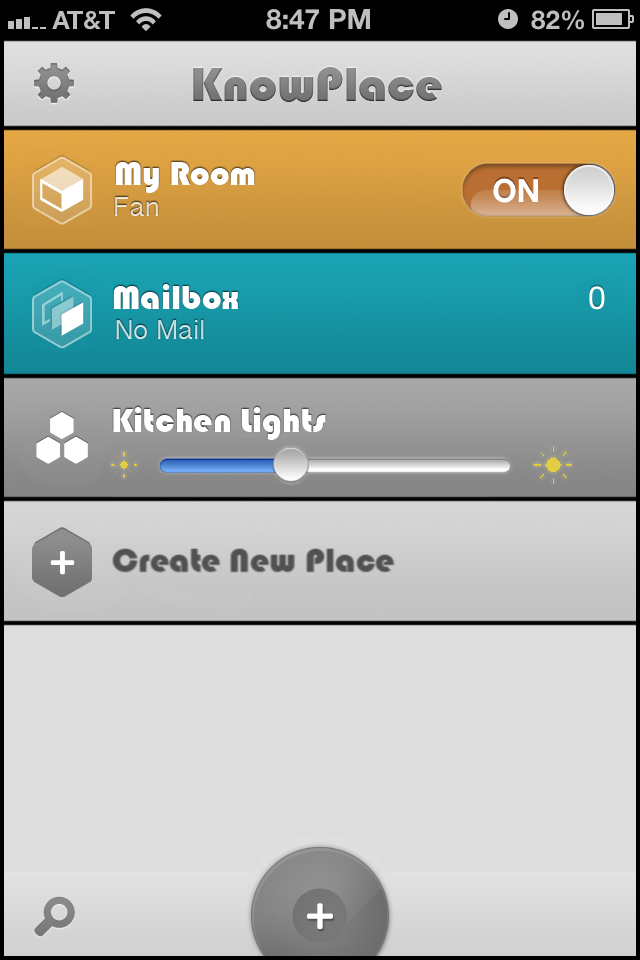
<style>
.page{position:relative;width:640px;height:960px;background:#dddddd}
.page>*{position:absolute;margin:0}
.t1{font:35px "Bauhaus93";color:#ffffff}
.t2{font:28px "BanglaSangamMN";color:#e1d5c1}
.t3{font:28px "BanglaSangamMN";color:#b2dadf}
.t4{font:35px "Bauhaus93";color:#515151}
</style>
<div class="page">
<p class="t1" style="left:115px;top:162px;width:140px;height:31px">My Room</p>
<p class="t2" style="left:115px;top:197px;width:43px;height:19px">Fan</p>
<p class="t1" style="left:113px;top:284px;width:125px;height:25px">Mailbox</p>
<p class="t3" style="left:116px;top:320px;width:88px;height:19px">No Mail</p>
<p class="t1" style="left:113px;top:407px;width:213px;height:33px">Kitchen Lights</p>
<p class="t4" style="left:112px;top:550px;width:282px;height:23px">Create New Place</p>
</div>
